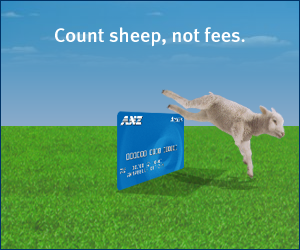
<style>
.page{position:relative;width:300px;height:250px}
.page>*{position:absolute;margin:0}
.t1{font:20px "MetaMediumLF-Roman";color:#ffffff}
</style>
<div class="page">
<p class="t1" style="left:55px;top:27px;width:190px;height:20px">Count sheep, not fees.</p>
</div>
